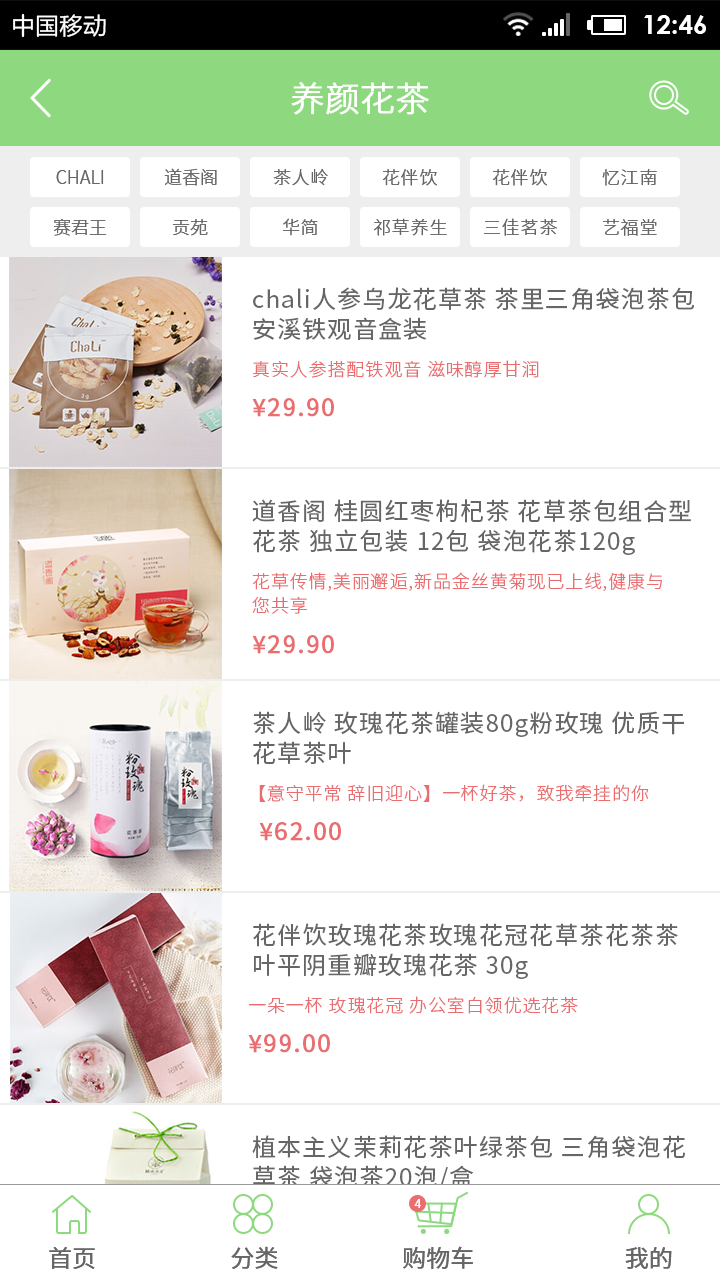
<style>
.page{position:relative;width:720px;height:1280px;background:#ffffff}
.page>*{position:absolute;margin:0}
.t1{font:34px "NotoSansHans-Light";color:#ffffff;font-weight:bold}
.t2{font:18px "NotoSansHans-Light";color:#666666;text-transform:uppercase}
.t3{font:18px "NotoSansHans-Light";letter-spacing:0.05em;color:#666666}
.t4{font:24px/30px "NotoSansHans-Regular";letter-spacing:0.05em;color:#666666}
.t5{font:18px "NotoSansHans-Light";letter-spacing:0.05em;color:#ea6d6f}
.t6{font:24px "NotoSansHans-Regular";letter-spacing:0.05em;color:#ea6d6f;font-weight:bold}
.t7{font:18px/24px "NotoSansHans-Light";letter-spacing:0.05em;color:#ea6d6f}
.t8{font:12px "NotoSansHans-Regular";color:#ffffff;text-transform:uppercase}
.t9{font:24px "NotoSansHans-Regular";color:#666666;text-transform:uppercase}
</style>
<div class="page">
<p class="t1" style="left:291px;top:82px;width:138px;height:33px">养颜花茶</p>
<p class="t2" style="left:56px;top:170px;width:48px;height:14px">chali</p>
<p class="t2" style="left:164px;top:168px;width:53px;height:18px">道香阁</p>
<p class="t3" style="left:273px;top:168px;width:55px;height:18px">茶人岭</p>
<p class="t3" style="left:382px;top:169px;width:55px;height:17px">花伴饮</p>
<p class="t3" style="left:492px;top:169px;width:55px;height:17px">花伴饮</p>
<p class="t3" style="left:602px;top:169px;width:55px;height:17px">忆江南</p>
<p class="t2" style="left:53px;top:218px;width:54px;height:18px">赛君王</p>
<p class="t2" style="left:173px;top:219px;width:35px;height:17px">贡苑</p>
<p class="t3" style="left:283px;top:218px;width:35px;height:18px">华简</p>
<p class="t3" style="left:373px;top:218px;width:74px;height:18px">祁草养生</p>
<p class="t3" style="left:484px;top:218px;width:73px;height:18px">三佳茗茶</p>
<p class="t3" style="left:603px;top:219px;width:54px;height:17px">艺福堂</p>
<p class="t4" style="left:253px;top:287px;width:441px;height:54px">chali人参乌龙花草茶 茶里三角袋泡茶包安溪铁观音盒装</p>
<p class="t5" style="left:253px;top:360px;width:286px;height:18px">真实人参搭配铁观音 滋味醇厚甘润</p>
<p class="t6" style="left:252px;top:398px;width:82px;height:19px">¥29.90</p>
<p class="t4" style="left:252px;top:499px;width:439px;height:56px">道香阁 桂圆红枣枸杞茶 花草茶包组合型花茶 独立包装 12包 袋泡花茶120g</p>
<p class="t7" style="left:252px;top:572px;width:410px;height:42px">花草传情,美丽邂逅,新品金丝黄菊现已上线,健康与<br>您共享</p>
<p class="t6" style="left:252px;top:635px;width:82px;height:19px">¥29.90</p>
<p class="t4" style="left:253px;top:711px;width:431px;height:54px">茶人岭 玫瑰花茶罐装80g粉玫瑰 优质干 花草茶叶</p>
<p class="t5" style="left:259px;top:784px;width:390px;height:18px">【意守平常 辞旧迎心】一杯好茶，致我牵挂的你</p>
<p class="t6" style="left:259px;top:822px;width:82px;height:19px">¥62.00</p>
<p class="t4" style="left:253px;top:923px;width:425px;height:56px">花伴饮玫瑰花茶玫瑰花冠花草茶花茶茶叶平阴重瓣玫瑰花茶 30g</p>
<p class="t5" style="left:249px;top:996px;width:329px;height:18px">一朵一杯 玫瑰花冠 办公室白领优选花茶</p>
<p class="t6" style="left:248px;top:1034px;width:82px;height:19px">¥99.00</p>
<p class="t4" style="left:252px;top:1135px;width:433px;height:56px">植本主义茉莉花茶叶绿茶包 三角袋泡花草茶 袋泡茶20泡/盒</p>
<p class="t8" style="left:414px;top:1199px;width:7px;height:9px">4</p>
<p class="t9" style="left:49px;top:1246px;width:623px;height:23px">首页                         分类                       购物车                            我的</p>
</div>
